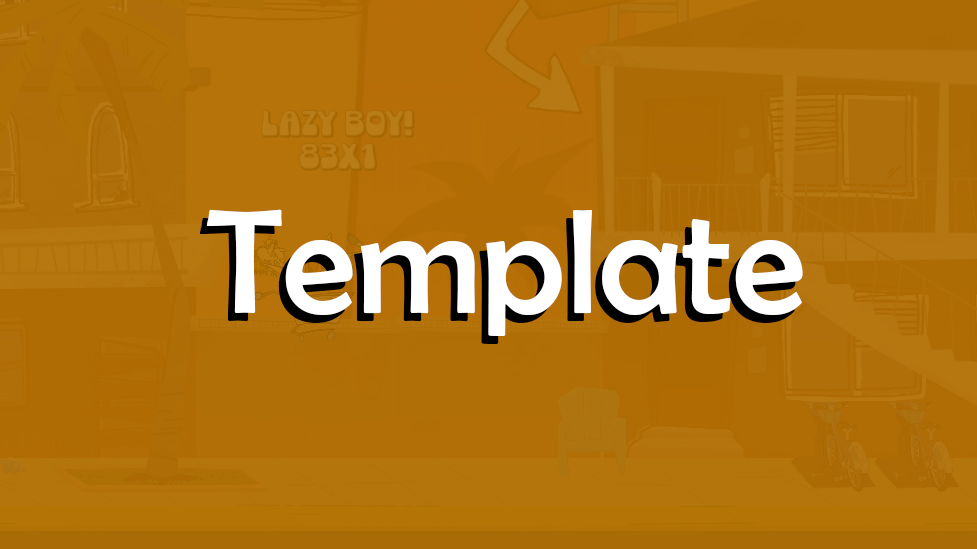
<style>
.page{position:relative;width:977px;height:549px}
.page>*{position:absolute;margin:0}
.t1{font:150px "BerlinSansFB-Reg";color:#ffffff}
.t2{font:150px "BerlinSansFB-Reg"}
</style>
<div class="page">
<p class="t1" style="left:206px;top:209px;width:597px;height:127px">Template</p>
<p class="t2" style="left:199px;top:217px;width:597px;height:127px">Template</p>
</div>
